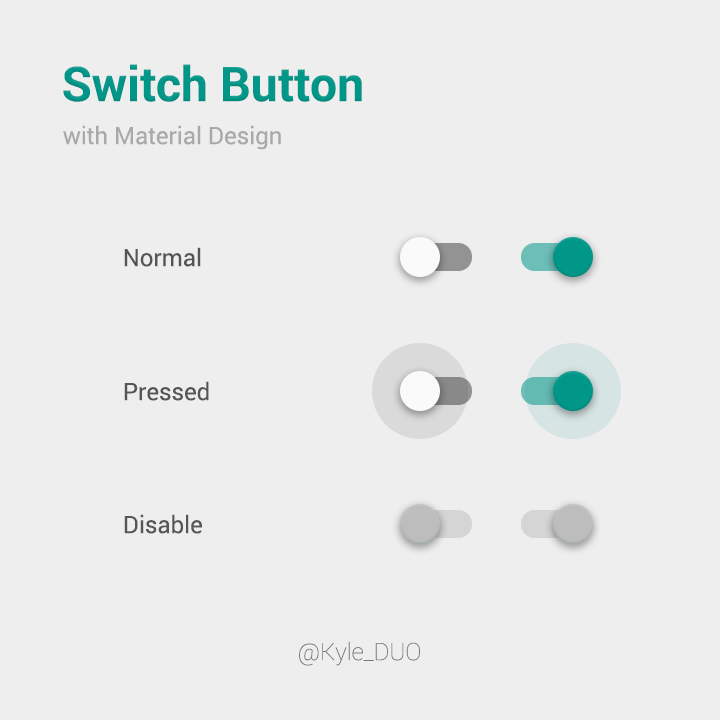
<style>
.page{position:relative;width:720px;height:720px;background:#eeeeee}
.page>*{position:absolute;margin:0}
.t1{font:48px "Roboto-Bold";color:#009688}
.t2{font:24px "Roboto-Regular";color:#a9a9a9}
.t3{font:24px "Roboto-Regular";color:#565656}
.t4{font:24px "Roboto-Thin";color:#777777}
</style>
<div class="page">
<p class="t1" style="left:63px;top:64px;width:299px;height:38px">Switch Button</p>
<p class="t2" style="left:63px;top:125px;width:218px;height:25px">with Material Design</p>
<p class="t3" style="left:124px;top:247px;width:77px;height:20px">Normal</p>
<p class="t3" style="left:124px;top:381px;width:85px;height:20px">Pressed</p>
<p class="t3" style="left:124px;top:514px;width:78px;height:20px">Disable</p>
<p class="t4" style="left:299px;top:641px;width:121px;height:25px">@Kyle_DUO</p>
</div>
